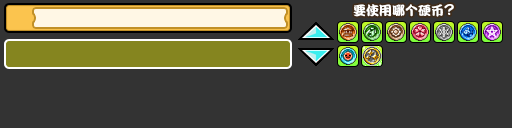
<style>
.page{position:relative;width:512px;height:128px;background:#333333}
.page>*{position:absolute;margin:0}
.t1{font:13px "DFPKanTingLiuW9";color:#ffffff}
.t2{font:16px "DFPKanTingLiuW9";color:#ffffff}
</style>
<div class="page">
<p class="t1" style="left:353px;top:4px;width:101px;height:13px">要使用哪个硬币<span class="t2">?</span></p>
</div>
